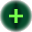
<style>
.page{position:relative;width:32px;height:32px}
.page>*{position:absolute;margin:0}
.t1{font:34px "ACaslonPro-Regular";letter-spacing:0.1em;color:#77fd4d;font-weight:bold}
</style>
<div class="page">
<p class="t1" style="left:9px;top:9px;width:14px;height:14px">+</p>
</div>
